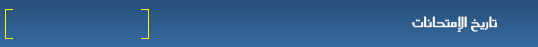
<style>
.page{position:relative;width:538px;height:47px}
.page>*{position:absolute;margin:0}
.t1{font:17px "SC_KHALID";color:#fdfefc}
</style>
<div class="page">
<p class="t1" style="left:412px;top:16px;width:85px;height:16px">تاريخ  الإمتحانات</p>
</div>
